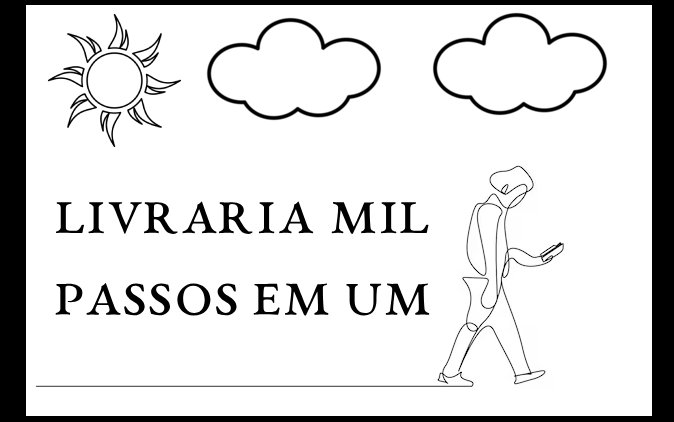
<style>
.page{position:relative;width:674px;height:422px;background:#ffffff}
.page>*{position:absolute;margin:0}
.t1{font:68px "EBGaramond12-AllSC";color:#000000}
</style>
<div class="page">
<p class="t1" style="left:55px;top:201px;width:375px;height:116px;text-align:center">Livraria mil passos em um</p>
</div>
